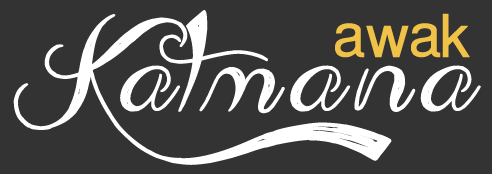
<style>
.page{position:relative;width:492px;height:174px;background:#333333}
.page>*{position:absolute;margin:0}
.t1{font:90px "AdmirationPains";letter-spacing:0.1em;color:#ffffff;font-weight:bold}
.t2{font:60px "OpusChordsSansStd";letter-spacing:-0.03em;color:#f0c348;font-weight:bold}
</style>
<div class="page">
<p class="t1" style="left:13px;top:10px;width:468px;height:155px">Katmana</p>
<p class="t2" style="left:335px;top:13px;width:135px;height:45px">awak</p>
</div>
